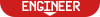
<style>
.page{position:relative;width:100px;height:17px;background:#cd1e1e}
.page>*{position:absolute;margin:0}
.t1{font:15px "GlassGauge";color:#ffffff}
</style>
<div class="page">
<p class="t1" style="left:22px;top:1px;width:58px;height:10px">ENGINEER</p>
</div>
